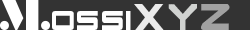
<style>
.page{position:relative;width:250px;height:30px;background:#333333}
.page>*{position:absolute;margin:0}
.t1{font:24px "Kildor";color:#ffffff;scale:0.67 1}
.t2{font:28px "Neptune8-Black";color:#ffffff;scale:0.5 1}
.t3{font:33px "Kildor";color:#ebebeb;scale:0.67 1}
.t4{font:33px "Kildor";color:#d0d2d0;scale:0.67 1}
.t5{font:33px "Kildor";color:#a1a1a1;scale:0.67 1}
</style>
<div class="page">
<p class="t1" style="left:52px;top:4px;width:178px;height:26px"><span class="t2"><br></span>ossi<span class="t3">X</span><span class="t4">Y</span><span class="t5">Z</span></p>
</div>
